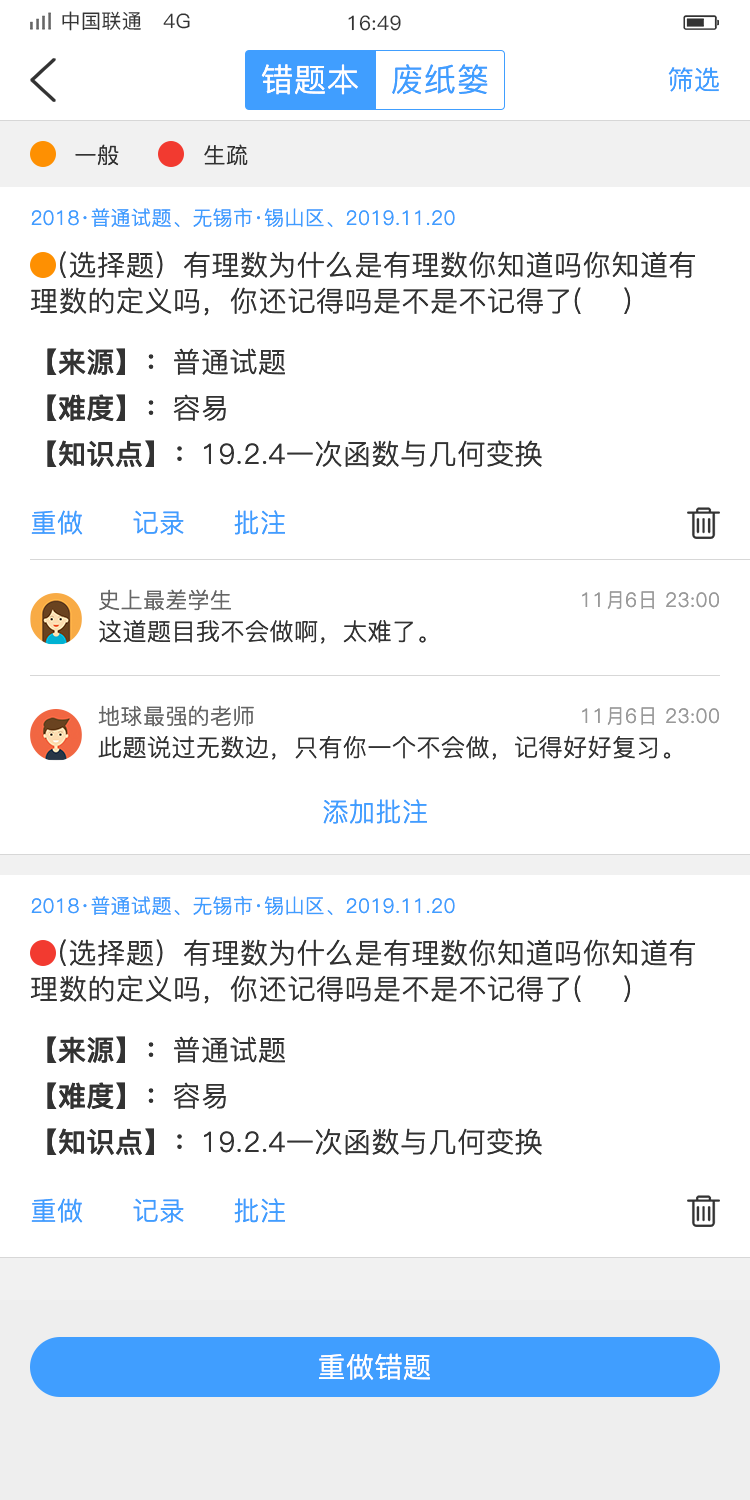
<style>
.page{position:relative;width:750px;height:1500px;background:#ffffff}
.page>*{position:absolute;margin:0}
.t1{font:20px "PingFang-SC-Medium";letter-spacing:0.02em;color:#333333}
.t2{font:32px "PingFang-SC-Regular";letter-spacing:0.02em;color:#ffffff}
.t3{font:32px "PingFang-SC-Regular";letter-spacing:0.02em;color:#409eff}
.t4{font:26px "PingFang-SC-Regular";letter-spacing:0.02em;color:#409eff}
.t5{font:22px "PingFang-SC-Regular";letter-spacing:0.02em;color:#333333}
.t6{font:20px "PingFang-SC-Regular";letter-spacing:0.02em;color:#409eff}
.t7{font:28px/36px "PingFang-SC-Regular";letter-spacing:0.02em;color:#333333}
.t8{font:28px "PingFang-SC-Bold";letter-spacing:0.02em;color:#333333}
.t9{font:28px "PingFang-SC-Regular";letter-spacing:0.02em;color:#333333}
.t10{font:22px "PingFang-SC-Regular";letter-spacing:0.02em;color:#666666}
.t11{font:20px "PingFang-SC-Regular";letter-spacing:0.02em;color:#999999}
.t12{font:24px "PingFang-SC-Regular";letter-spacing:0.02em;color:#333333}
.t13{font:28px "PingFang-SC-Regular";letter-spacing:0.02em;color:#ffffff}
</style>
<div class="page">
<p class="t1" style="left:62px;top:11px;width:128px;height:20px">中国联通   4G</p>
<p class="t1" style="left:348px;top:15px;width:53px;height:16px">16:49</p>
<p class="t2" style="left:261px;top:64px;width:97px;height:31px">错题本</p>
<p class="t3" style="left:392px;top:64px;width:96px;height:31px">废纸篓</p>
<p class="t4" style="left:668px;top:67px;width:51px;height:25px">筛选</p>
<p class="t5" style="left:75px;top:144px;width:44px;height:22px">一般</p>
<p class="t5" style="left:204px;top:144px;width:44px;height:22px">生疏</p>
<p class="t6" style="left:31px;top:208px;width:424px;height:19px">2018·普通试题、无锡市·锡山区、2019.11.20</p>
<p class="t7" style="left:30px;top:251px;width:665px;height:65px">（选择题）有理数为什么是有理数你知道吗你知道有理数的定义吗，你还记得吗是不是不记得了(    )</p>
<p class="t8" style="left:47px;top:348px;width:238px;height:27px">【来源】：<span class="t9">普通试题</span></p>
<p class="t8" style="left:47px;top:394px;width:179px;height:28px">【难度】：<span class="t9">容易</span></p>
<p class="t9" style="left:47px;top:440px;width:495px;height:27px"><span class="t8">【知识点】：</span>19.2.4一次函数与几何变换</p>
<p class="t4" style="left:31px;top:510px;width:52px;height:25px">重做</p>
<p class="t4" style="left:133px;top:510px;width:51px;height:25px">记录</p>
<p class="t4" style="left:234px;top:510px;width:51px;height:25px">批注</p>
<p class="t10" style="left:99px;top:589px;width:132px;height:22px">史上最差学生</p>
<p class="t11" style="left:582px;top:591px;width:137px;height:18px">11月6日 23:00</p>
<p class="t12" style="left:99px;top:620px;width:327px;height:24px">这道题目我不会做啊，太难了。</p>
<p class="t10" style="left:98px;top:705px;width:156px;height:22px">地球最强的老师</p>
<p class="t11" style="left:582px;top:707px;width:137px;height:18px">11月6日 23:00</p>
<p class="t12" style="left:98px;top:735px;width:573px;height:25px">此题说过无数边，只有你一个不会做，记得好好复习。</p>
<p class="t4" style="left:323px;top:799px;width:104px;height:25px">添加批注</p>
<p class="t6" style="left:31px;top:896px;width:424px;height:19px">2018·普通试题、无锡市·锡山区、2019.11.20</p>
<p class="t7" style="left:30px;top:939px;width:665px;height:65px">（选择题）有理数为什么是有理数你知道吗你知道有理数的定义吗，你还记得吗是不是不记得了(    )</p>
<p class="t8" style="left:47px;top:1036px;width:238px;height:27px">【来源】：<span class="t9">普通试题</span></p>
<p class="t8" style="left:47px;top:1082px;width:179px;height:28px">【难度】：<span class="t9">容易</span></p>
<p class="t9" style="left:47px;top:1128px;width:495px;height:27px"><span class="t8">【知识点】：</span>19.2.4一次函数与几何变换</p>
<p class="t4" style="left:31px;top:1198px;width:52px;height:25px">重做</p>
<p class="t4" style="left:133px;top:1198px;width:51px;height:25px">记录</p>
<p class="t4" style="left:234px;top:1198px;width:51px;height:25px">批注</p>
<p class="t13" style="left:319px;top:1353px;width:111px;height:27px">重做错题</p>
</div>
